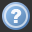
<style>
.page{position:relative;width:32px;height:32px;background:#333333}
.page>*{position:absolute;margin:0}
.t1{font:19px "Arial-Black";color:#f5f8fc}
</style>
<div class="page">
<p class="t1" style="left:11px;top:9px;width:11px;height:14px">?</p>
</div>
